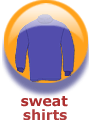
<style>
.page{position:relative;width:89px;height:120px;background:#ffffff}
.page>*{position:absolute;margin:0}
.t1{font:14px "Verdana-Bold";color:#ac2f2f}
.t2{font:14px "Verdana-Bold";color:#b13c3c}
</style>
<div class="page">
<p class="t1" style="left:21px;top:96px;width:47px;height:11px">sweat</p>
<p class="t2" style="left:23px;top:109px;width:44px;height:12px">shirts</p>
</div>
